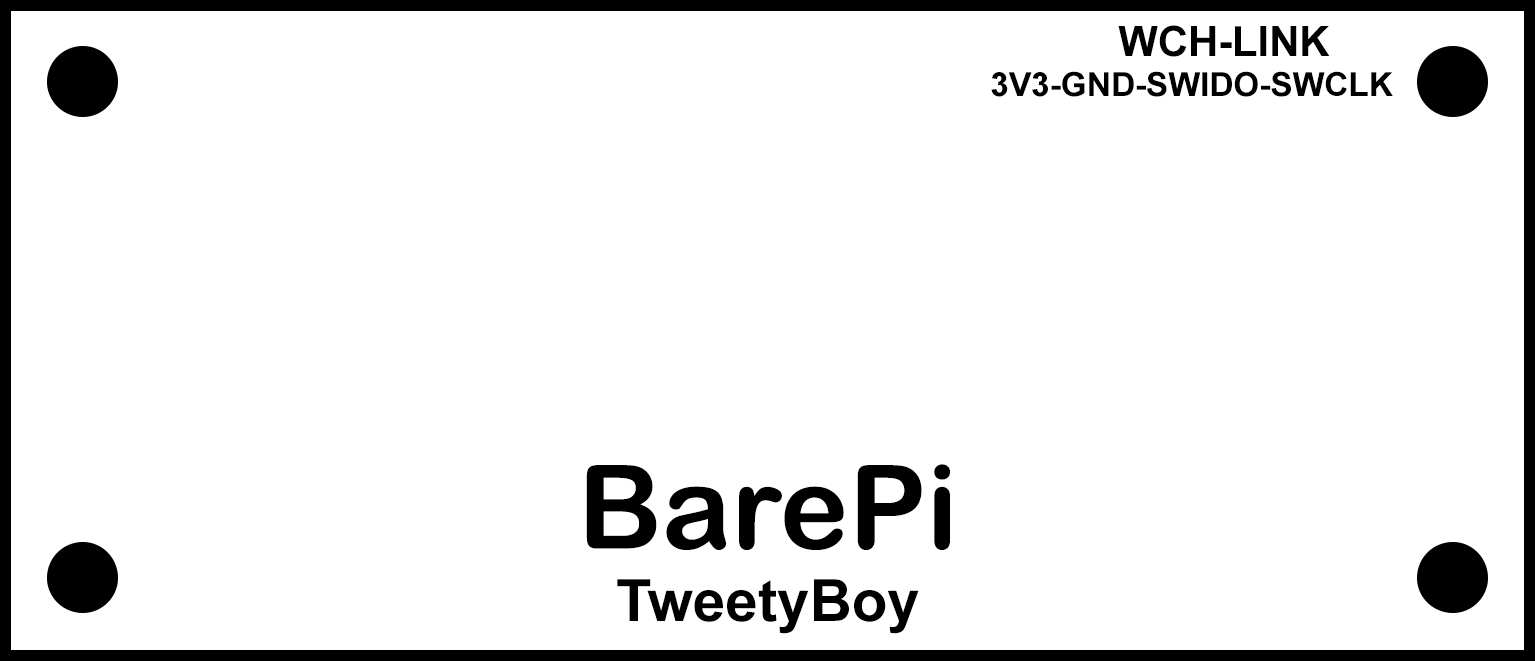
<style>
.page{position:relative;width:1535px;height:661px;background:#ffffff}
.page>*{position:absolute;margin:0}
.t1{font:33.3px "Arial-BoldMT";color:#000000}
.t2{font:41.7px "Arial-BoldMT";color:#000000}
.t3{font:116.3px "ArialRoundedMTBold";color:#000000}
.t4{font:58.3px "Arial-BoldMT";color:#000000}
</style>
<div class="page">
<p class="t1" style="left:991px;top:25px;width:402px;height:72px;text-align:center"><span class="t2">WCH-LINK<br></span>3V3-GND-SWIDO-SWCLK</p>
<p class="t3" style="left:586px;top:464px;width:364px;height:86px">BarePi</p>
<p class="t4" style="left:617px;top:579px;width:302px;height:55px">TweetyBoy</p>
</div>
